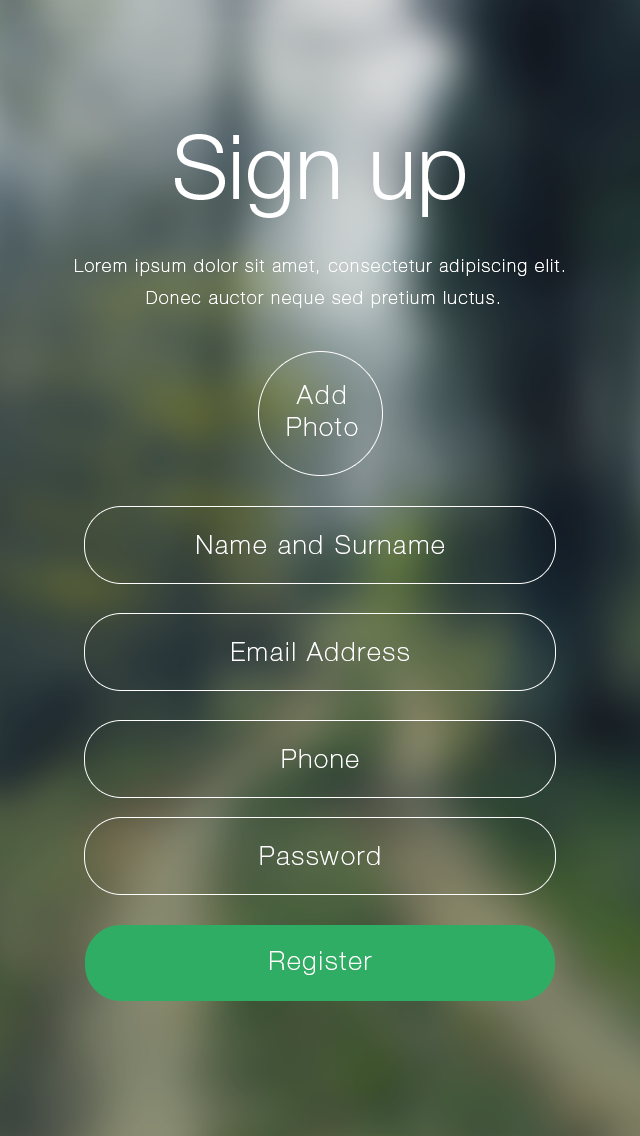
<style>
.page{position:relative;width:640px;height:1136px}
.page>*{position:absolute;margin:0}
.t1{font:90px "HelveticaNeueLTPro-Lt";color:#ffffff}
.t2{font:18px/32px "HelveticaNeueLTPro-Th";letter-spacing:0.08em;color:#ffffff}
.t3{font:26px/32px "HelveticaNeueLTPro-Th";letter-spacing:0.08em;color:#ffffff}
.t4{font:26px "HelveticaNeueLTPro-Th";letter-spacing:0.08em;color:#ffffff}
</style>
<div class="page">
<p class="t1" style="left:175px;top:134px;width:290px;height:84px">Sign up</p>
<p class="t2" style="left:75px;top:259px;width:489px;height:49px;text-align:center">Lorem ipsum dolor sit amet, consectetur adipiscing elit.<br> Donec auctor neque sed pretium luctus.</p>
<p class="t3" style="left:287px;top:385px;width:71px;height:51px;text-align:center">Add<br>Photo</p>
<p class="t4" style="left:197px;top:535px;width:247px;height:19px">Name and Surname</p>
<p class="t4" style="left:232px;top:642px;width:177px;height:19px">Email Address</p>
<p class="t4" style="left:282px;top:749px;width:77px;height:19px">Phone</p>
<p class="t4" style="left:260px;top:846px;width:120px;height:19px">Password</p>
<p class="t4" style="left:270px;top:951px;width:102px;height:24px">Register</p>
</div>
